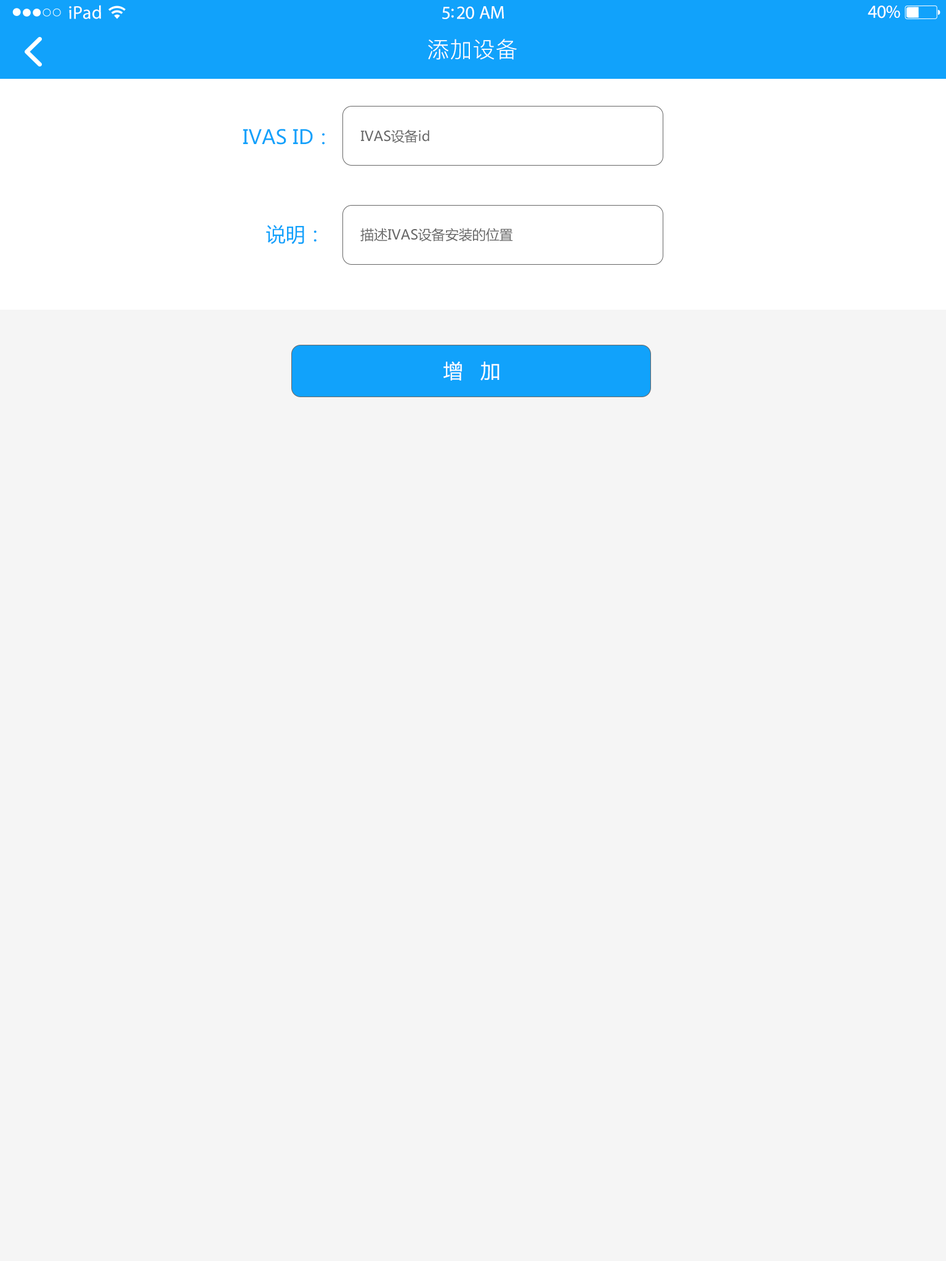
<style>
.page{position:relative;width:946px;height:1261px;background:#f5f5f5}
.page>*{position:absolute;margin:0}
.t1{font:18.5px "MyriadPro-Regular";letter-spacing:0.02em;color:#ffffff}
.t2{font:18.5px "MyriadPro-Regular";letter-spacing:-0.02em;color:#ffffff}
.t3{font:22.2px "PingFang-SC-Regular";letter-spacing:0.03em;color:#ffffff}
.t4{font:19.7px "MicrosoftYaHei";color:#11a2fb}
.t5{font:13.5px "MicrosoftYaHei";color:#666666}
.t6{font:19.7px "MicrosoftYaHei";color:#ffffff}
</style>
<div class="page">
<p class="t1" style="left:69px;top:5px;width:32px;height:14px">iPad</p>
<p class="t2" style="left:867px;top:6px;width:33px;height:12px">40%</p>
<p class="t2" style="left:442px;top:6px;width:62px;height:13px">5:20 AM</p>
<p class="t3" style="left:428px;top:39px;width:89px;height:21px">添加设备</p>
<p class="t4" style="left:243px;top:129px;width:81px;height:16px">IVAS ID：</p>
<p class="t5" style="left:361px;top:129px;width:68px;height:14px">IVAS设备id</p>
<p class="t4" style="left:266px;top:225px;width:50px;height:19px">说明：</p>
<p class="t5" style="left:360px;top:228px;width:153px;height:13px">描述IVAS设备安装的位置</p>
<p class="t6" style="left:443px;top:361px;width:56px;height:19px">增   加</p>
</div>
